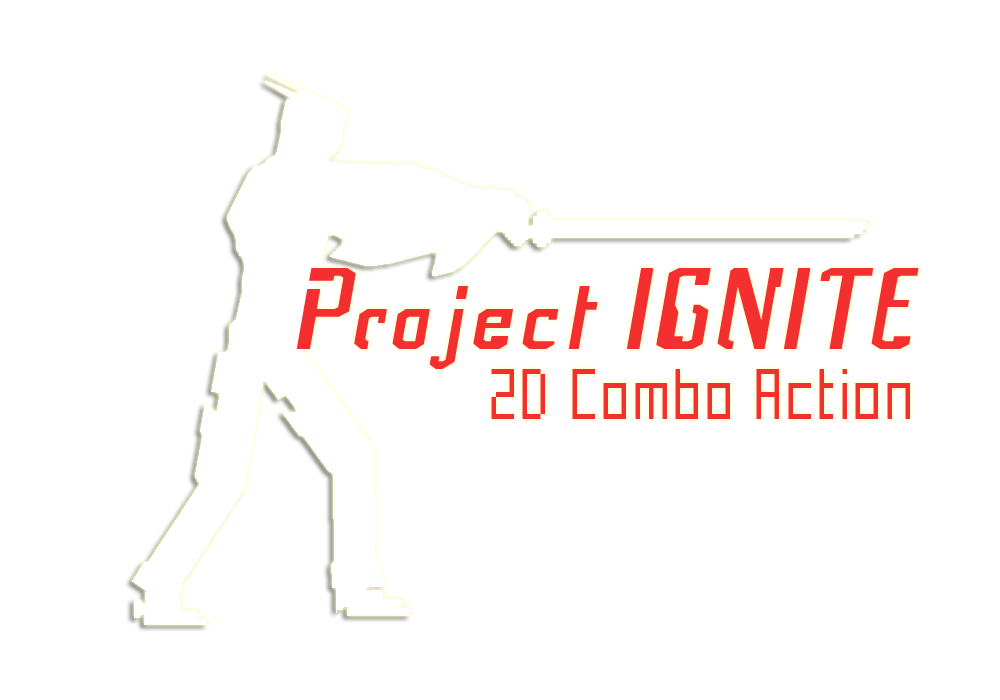
<style>
.page{position:relative;width:1000px;height:700px;background:#ffffff}
.page>*{position:absolute;margin:0}
.t1{font:110px "Frak-Regular";color:#f42f2f}
.t2{font:72px "Mecha";color:#f42f2f}
</style>
<div class="page">
<p class="t1" style="left:296px;top:268px;width:623px;height:101px">Project IGNITE</p>
<p class="t2" style="left:491px;top:369px;width:419px;height:50px">2D Combo Action</p>
</div>
